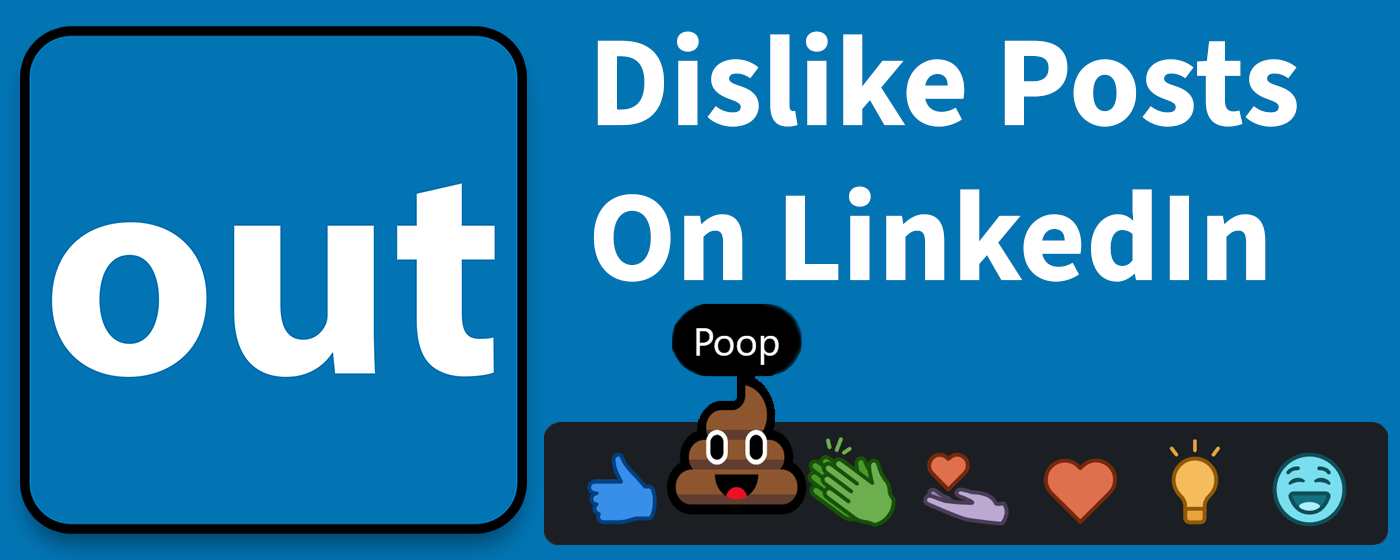
<style>
.page{position:relative;width:1400px;height:560px;background:#0274b3}
.page>*{position:absolute;margin:0}
.t1{font:129.2px "SourceSans3Roman-Bold";color:#ffffff}
</style>
<div class="page">
<p class="t1" style="left:593px;top:31px;width:704px;height:251px">Dislike Posts On LinkedIn</p>
</div>
